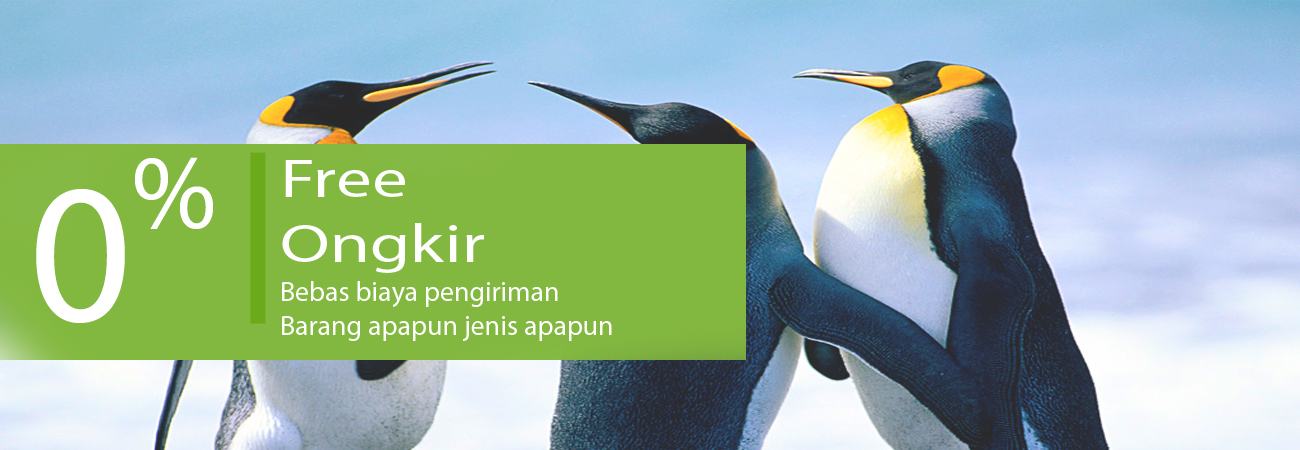
<style>
.page{position:relative;width:1300px;height:450px}
.page>*{position:absolute;margin:0}
.t1{font:106px "MyriadPro-Regular";color:#ffffff}
.t2{font:53.7px "MyriadPro-Regular";color:#fefefe;scale:1.34 1}
.t3{font:200px "MyriadPro-Regular";color:#ffffff}
.t4{font:28px "MyriadPro-Regular";color:#fefefe}
</style>
<div class="page">
<p class="t1" style="left:135px;top:157px;width:78px;height:72px">%</p>
<p class="t2" style="left:282px;top:160px;width:202px;height:113px">Free<br>Ongkir</p>
<p class="t3" style="left:36px;top:189px;width:89px;height:134px">0</p>
<p class="t4" style="left:282px;top:281px;width:330px;height:60px">Bebas biaya pengiriman<br>Barang apapun jenis apapun</p>
</div>
